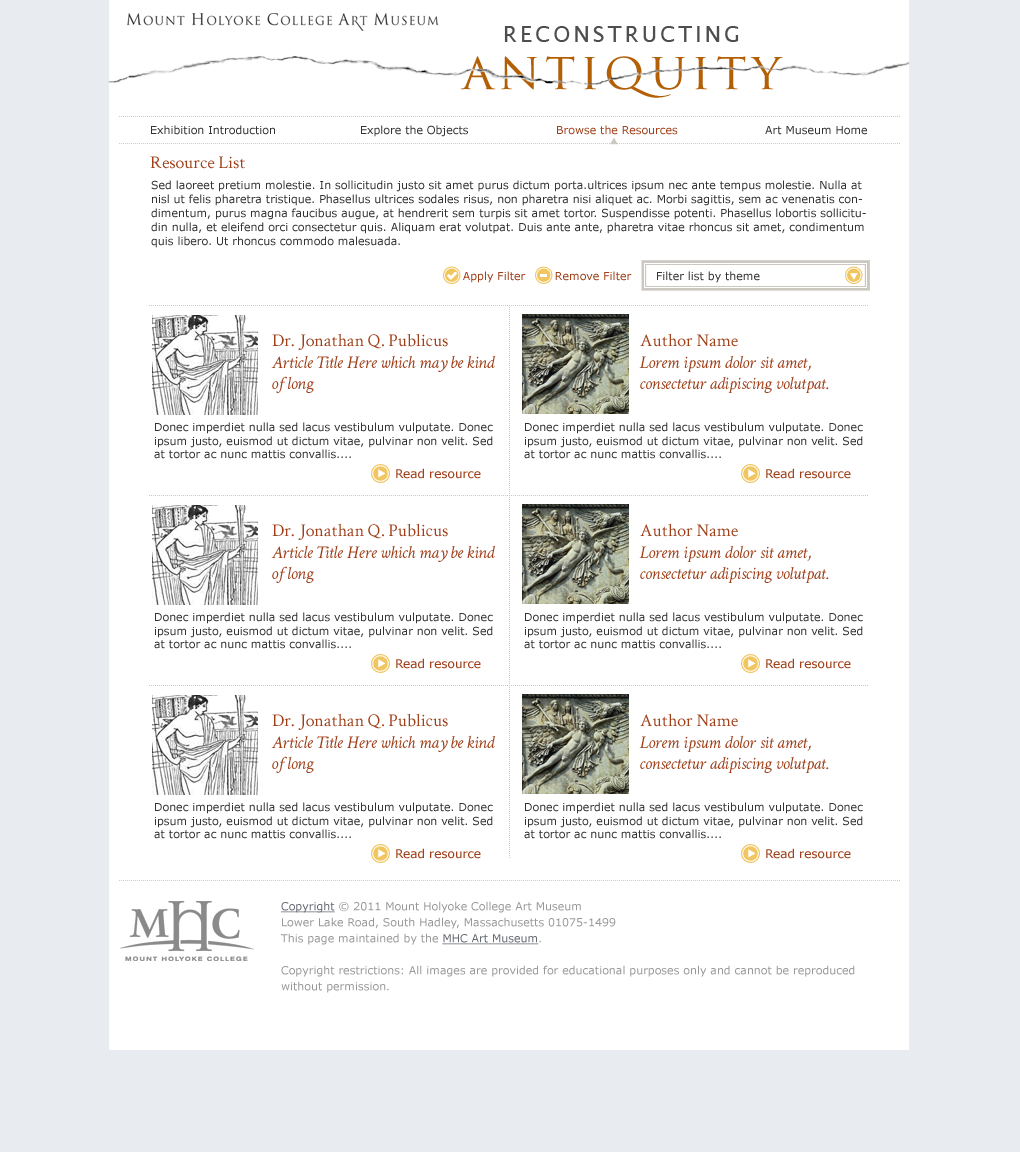
<style>
.page{position:relative;width:1020px;height:1152px;background:#ffffff}
.page>*{position:absolute;margin:0}
.t1{font:22px "LucidaSans";letter-spacing:0.14em;color:#4e4e4e;text-transform:uppercase}
.t2{font:50px "TrajanPro-Regular";letter-spacing:0.1em;color:#b25f06}
.t3{font:11px "Verdana";color:#333333}
.t4{font:11px "Verdana";color:#9f401a}
.t5{font:18px "CrimsonText-Roman";color:#9f401a}
.t6{font:11px/14px "Verdana";color:#333333}
.t7{font:18px "CrimsonText-Italic";color:#9f401a}
.t8{font:12px "Verdana";color:#9f401a}
.t9{font:11px/16px "Verdana";color:#999999}
.t10{font:11px/16px "Verdana";color:#656a71;text-decoration:underline}
.t11{font:11px/16px "Verdana";color:#656971;text-decoration:underline}
</style>
<div class="page">
<p class="t1" style="left:504px;top:26px;width:235px;height:16px">reconstructing</p>
<p class="t2" style="left:460px;top:56px;width:323px;height:42px">antiquity</p>
<p class="t3" style="left:151px;top:125px;width:124px;height:10px">Exhibition Introduction</p>
<p class="t3" style="left:361px;top:125px;width:107px;height:12px">Explore the Objects</p>
<p class="t4" style="left:557px;top:125px;width:121px;height:10px">Browse the Resources</p>
<p class="t3" style="left:765px;top:126px;width:102px;height:9px">Art Museum Home</p>
<p class="t5" style="left:150px;top:156px;width:95px;height:13px">Resource List</p>
<p class="t6" style="left:151px;top:180px;width:715px;height:68px">Sed laoreet pretium molestie. In sollicitudin justo sit amet purus dictum porta.ultrices ipsum nec ante tempus molestie. Nulla at nisl ut felis pharetra tristique. Phasellus ultrices sodales risus, non pharetra nisi aliquet ac. Morbi sagittis, sem ac venenatis condimentum, purus magna faucibus augue, at hendrerit sem turpis sit amet tortor. Suspendisse potenti. Phasellus lobortis sollicitudin nulla, et eleifend orci consectetur quis. Aliquam erat volutpat. Duis ante ante, pharetra vitae rhoncus sit amet, condimentum quis libero. Ut rhoncus commodo malesuada. <br><br>Sed scelerisque, purus a tincidunt auctor, nunc purus consequat libero, eu eleifend augue est ac risus. Fusce massa leo, ornare id accumsan et, vehicula et augue. Nulla scelerisque magna nec lacus porttitor aliquet aliquam ipsum semper.</p>
<p class="t4" style="left:463px;top:271px;width:63px;height:12px">Apply Filter</p>
<p class="t4" style="left:555px;top:271px;width:77px;height:10px">Remove Filter</p>
<p class="t3" style="left:657px;top:271px;width:103px;height:12px">Filter list by theme</p>
<p class="t7" style="left:271px;top:333px;width:225px;height:60px"><span class="t5">Dr. Jonathan Q. Publicus<br></span>Article Title Here which may be kind<br>of long</p>
<p class="t7" style="left:639px;top:333px;width:190px;height:60px"><span class="t5">Author Name<br></span>Lorem ipsum dolor sit amet, <br>consectetur adipiscing volutpat.</p>
<p class="t3" style="left:154px;top:422px;width:339px;height:37px">Donec imperdiet nulla sed lacus vestibulum vulputate. Donec ipsum justo, euismod ut dictum vitae, pulvinar non velit. Sed at tortor ac nunc mattis convallis....</p>
<p class="t3" style="left:524px;top:422px;width:339px;height:37px">Donec imperdiet nulla sed lacus vestibulum vulputate. Donec ipsum justo, euismod ut dictum vitae, pulvinar non velit. Sed at tortor ac nunc mattis convallis....</p>
<p class="t8" style="left:396px;top:468px;width:85px;height:11px">Read resource</p>
<p class="t8" style="left:766px;top:468px;width:85px;height:11px">Read resource</p>
<p class="t7" style="left:271px;top:523px;width:225px;height:60px"><span class="t5">Dr. Jonathan Q. Publicus<br></span>Article Title Here which may be kind<br>of long</p>
<p class="t7" style="left:639px;top:523px;width:190px;height:60px"><span class="t5">Author Name<br></span>Lorem ipsum dolor sit amet, <br>consectetur adipiscing volutpat.</p>
<p class="t3" style="left:154px;top:612px;width:339px;height:37px">Donec imperdiet nulla sed lacus vestibulum vulputate. Donec ipsum justo, euismod ut dictum vitae, pulvinar non velit. Sed at tortor ac nunc mattis convallis....</p>
<p class="t3" style="left:524px;top:612px;width:339px;height:37px">Donec imperdiet nulla sed lacus vestibulum vulputate. Donec ipsum justo, euismod ut dictum vitae, pulvinar non velit. Sed at tortor ac nunc mattis convallis....</p>
<p class="t8" style="left:396px;top:658px;width:85px;height:11px">Read resource</p>
<p class="t8" style="left:766px;top:658px;width:85px;height:11px">Read resource</p>
<p class="t7" style="left:271px;top:713px;width:225px;height:60px"><span class="t5">Dr. Jonathan Q. Publicus<br></span>Article Title Here which may be kind<br>of long</p>
<p class="t7" style="left:639px;top:713px;width:190px;height:60px"><span class="t5">Author Name<br></span>Lorem ipsum dolor sit amet, <br>consectetur adipiscing volutpat.</p>
<p class="t3" style="left:154px;top:802px;width:339px;height:37px">Donec imperdiet nulla sed lacus vestibulum vulputate. Donec ipsum justo, euismod ut dictum vitae, pulvinar non velit. Sed at tortor ac nunc mattis convallis....</p>
<p class="t3" style="left:524px;top:802px;width:339px;height:37px">Donec imperdiet nulla sed lacus vestibulum vulputate. Donec ipsum justo, euismod ut dictum vitae, pulvinar non velit. Sed at tortor ac nunc mattis convallis....</p>
<p class="t8" style="left:396px;top:848px;width:85px;height:11px">Read resource</p>
<p class="t8" style="left:766px;top:848px;width:85px;height:11px">Read resource</p>
<p class="t9" style="left:281px;top:901px;width:574px;height:92px"><span class="t10">Copyright </span>© 2011 Mount Holyoke College Art Museum<br>Lower Lake Road, South Hadley, Massachusetts 01075-1499<br>This page maintained by the <span class="t11">MHC Art Museum</span>.<br><br>Copyright restrictions: All images are provided for educational purposes only and cannot be reproduced without permission.</p>
</div>
